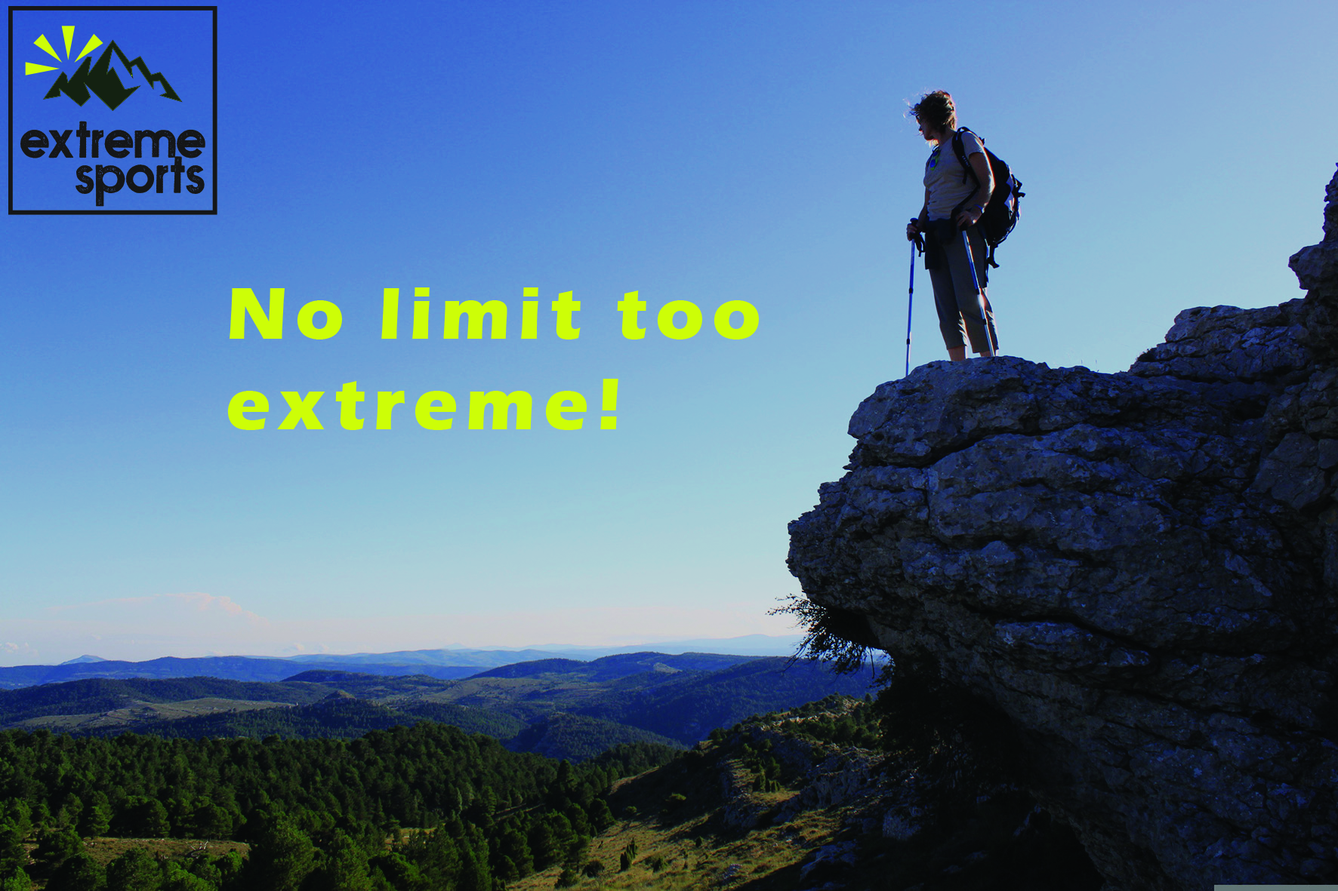
<style>
.page{position:relative;width:1338px;height:891px}
.page>*{position:absolute;margin:0}
.t1{font:75.5px "ErasITC-Bold";letter-spacing:0.1em;color:#cdfe07}
</style>
<div class="page">
<p class="t1" style="left:227px;top:288px;width:532px;height:142px">No limit too <br>extreme!</p>
</div>
